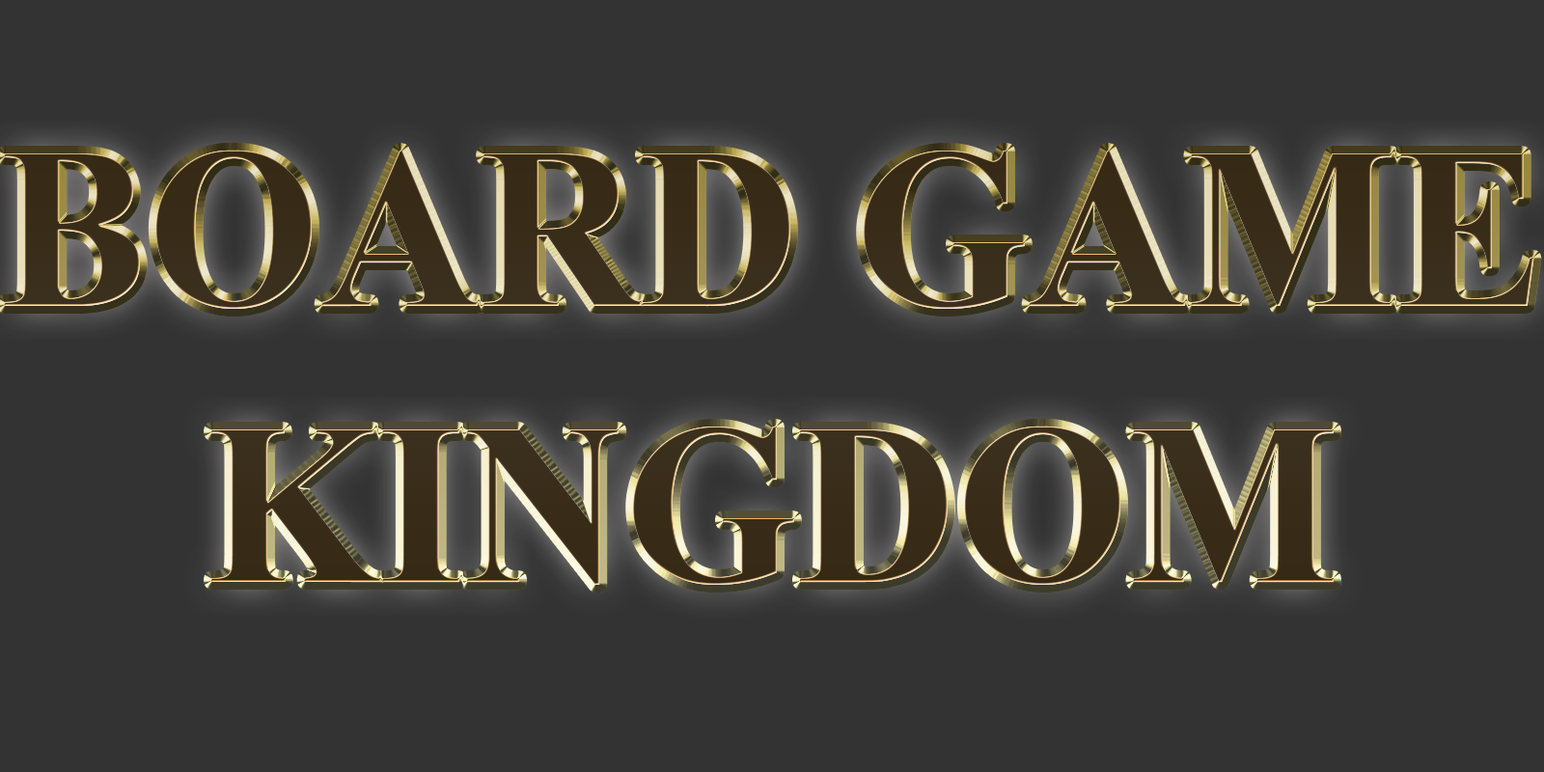
<style>
.page{position:relative;width:1544px;height:772px;background:#333333}
.page>*{position:absolute;margin:0}
.t1{font:55.2px "TimesNewRomanPS-BoldMT";color:#392d1a;scale:0.96 1}
</style>
<div class="page">
<p class="t1" style="left:4px;top:150px;width:1531px;height:435px;text-align:center">BOARD GAME<br>KINGDOM</p>
<p class="t1" style="left:4px;top:150px;width:1531px;height:435px;text-align:center">BOARD GAME<br>KINGDOM</p>
</div>
